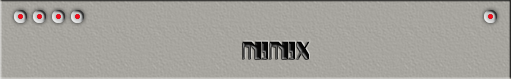
<style>
.page{position:relative;width:511px;height:79px}
.page>*{position:absolute;margin:0}
.t1{font:30px "Drosselmeyer";color:#070707}
</style>
<div class="page">
<p class="t1" style="left:243px;top:41px;width:67px;height:18px">MIMIX</p>
</div>
